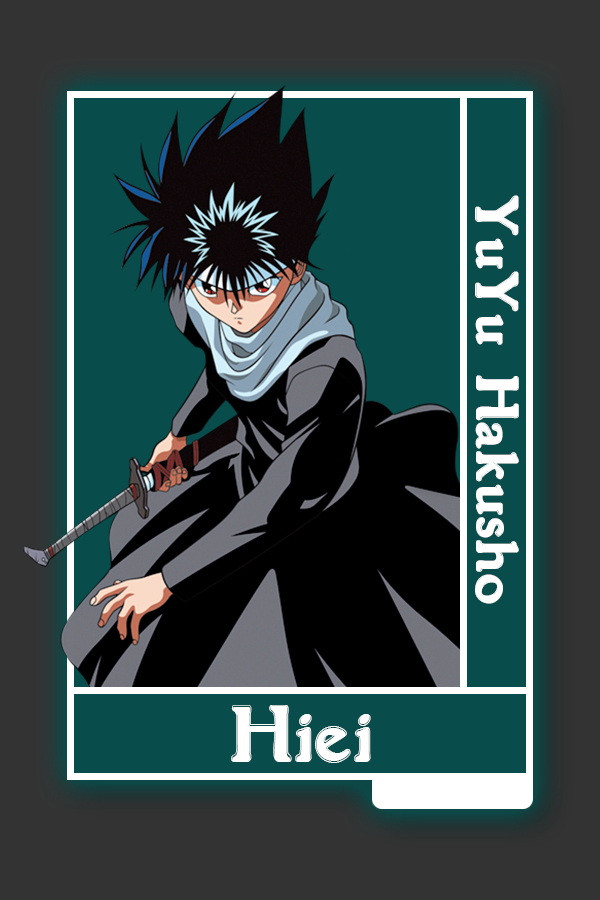
<style>
.page{position:relative;width:600px;height:900px;background:#084d4c}
.page>*{position:absolute;margin:0}
.t1{font:55.2px "GranthamOutline";color:#ffffff}
.t2{font:75px "GranthamOutline";color:#ffffff}
</style>
<div class="page">
<p class="t1" style="left:475px;top:195px;width:44px;height:409px;rotate:90deg">YuYu Hakusho</p>
<p class="t2" style="left:231px;top:705px;width:140px;height:58px">Hiei</p>
</div>
